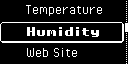
<style>
.page{position:relative;width:128px;height:64px;background:#000000}
.page>*{position:absolute;margin:0}
.t1{font:16px "PixelOperator";color:#fefefe}
.t2{font:10px "PixelOperator8-Bold";color:#fefefe}
</style>
<div class="page">
<p class="t1" style="left:26px;top:5px;width:76px;height:11px">Temperature</p>
<p class="t2" style="left:27px;top:27px;width:72px;height:10px">Humidity</p>
<p class="t1" style="left:27px;top:48px;width:50px;height:9px">Web Site</p>
</div>
